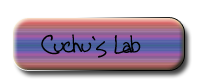
<style>
.page{position:relative;width:200px;height:82px;background:#ffffff}
.page>*{position:absolute;margin:0}
.t1{font:30px "TallPaul";color:#010101}
</style>
<div class="page">
<p class="t1" style="left:41px;top:34px;width:100px;height:24px">Cuchu`s Lab</p>
</div>
